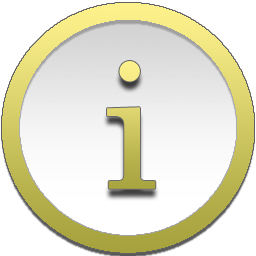
<style>
.page{position:relative;width:256px;height:256px;background:#ffffff}
.page>*{position:absolute;margin:0}
.t1{font:172.9px "Century";font-weight:bold}
</style>
<div class="page">
<p class="t1" style="left:107px;top:61px;width:49px;height:128px">i</p>
</div>
